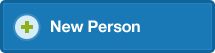
<style>
.page{position:relative;width:215px;height:53px;background:#1979b7}
.page>*{position:absolute;margin:0}
.t1{font:16px "HelveticaNeue-Bold";letter-spacing:-0.01em;color:#ffffff}
</style>
<div class="page">
<p class="t1" style="left:51px;top:20px;width:89px;height:13px">New Person</p>
</div>
